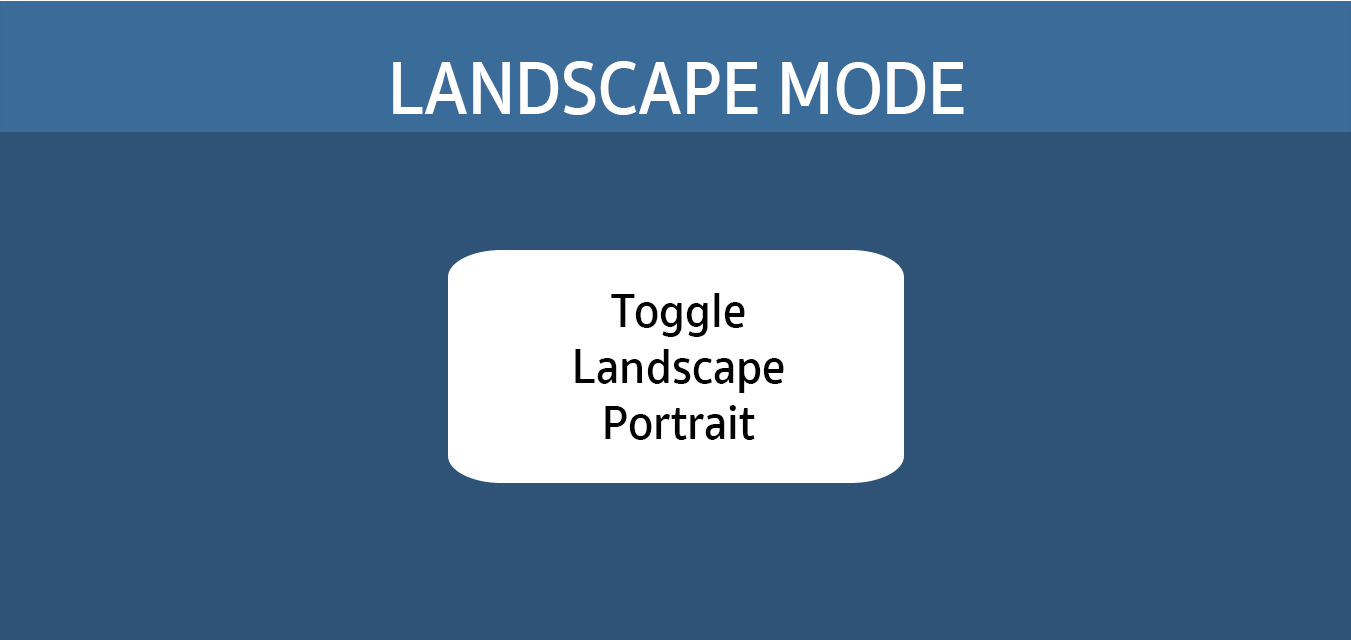
<style>
.page{position:relative;width:1351px;height:640px;background:#2e5376}
.page>*{position:absolute;margin:0}
.t1{font:76.6px "SukhumvitSet-SemiBold";color:#ffffff;scale:0.91 1}
.t2{font:50.4px/56.3px "SukhumvitSet-SemiBold";color:#010101;scale:0.91 1}
</style>
<div class="page">
<p class="t1" style="left:393px;top:61px;width:571px;height:54px">LANDSCAPE MODE</p>
<p class="t2" style="left:575px;top:293px;width:209px;height:147px;text-align:center">Toggle<br>Landscape<br>Portrait</p>
</div>
